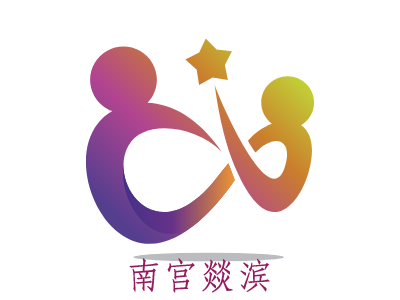
<style>
.page{position:relative;width:400px;height:300px;background:#ffffff}
.page>*{position:absolute;margin:0}
.t1{font:36px "STFangsong";color:#941c61;font-weight:bold}
</style>
<div class="page">
<p class="t1" style="left:129px;top:258px;width:141px;height:35px">南宫燚滨</p>
</div>
